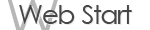
<style>
.page{position:relative;width:150px;height:30px;background:#ffffff}
.page>*{position:absolute;margin:0}
.t1{font:26px "LevenimMT";letter-spacing:-0.05em;color:#464646}
.t2{font:26px "LevenimMT";letter-spacing:-0.05em}
</style>
<div class="page">
<p class="t1" style="left:19px;top:5px;width:113px;height:19px">Web Start</p>
<p class="t2" style="left:20px;top:6px;width:113px;height:19px">Web Start</p>
</div>
